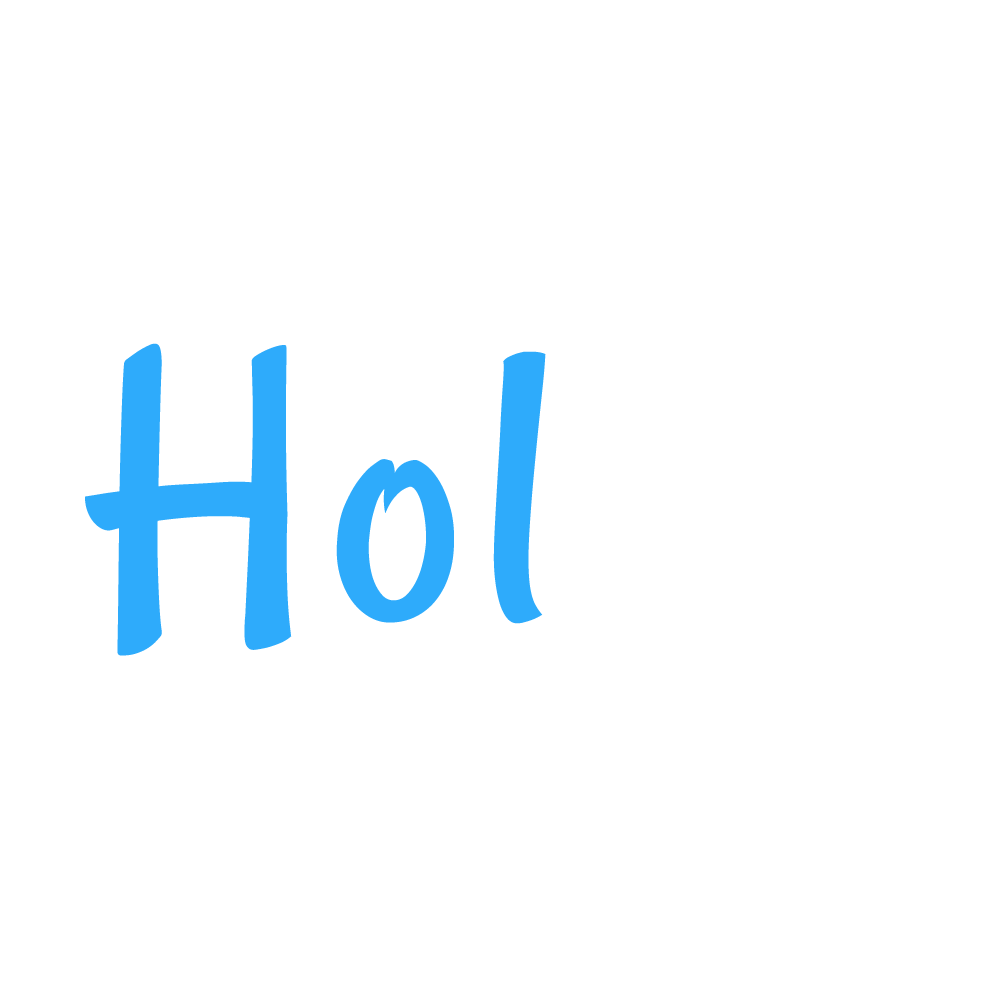
<style>
.page{position:relative;width:1000px;height:1000px;background:#ffffff}
.page>*{position:absolute;margin:0}
.t1{font:416.7px "Rancho-Regular";letter-spacing:0.04em;color:#2eabfb}
</style>
<div class="page">
<p class="t1" style="left:85px;top:343px;width:461px;height:313px">Hol</p>
</div>
